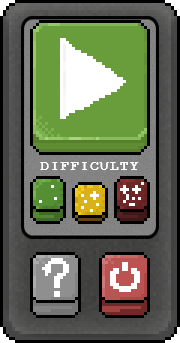
<style>
.page{position:relative;width:180px;height:343px}
.page>*{position:absolute;margin:0}
.t1{font:15.2px "CourierNewPS-BoldMT";letter-spacing:0.051em;color:#ffffff}
</style>
<div class="page">
<p class="t1" style="left:40px;top:162px;width:99px;height:8px">DIFFICULTY</p>
</div>
